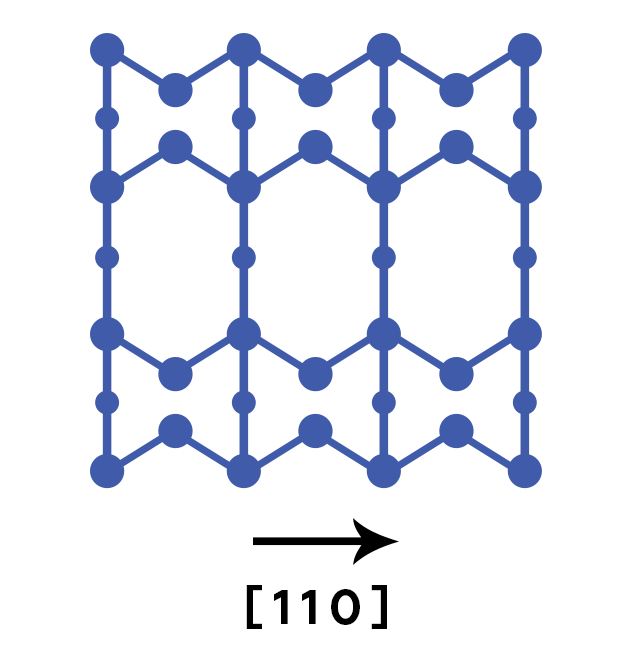
<style>
.page{position:relative;width:621px;height:669px;background:#ffffff}
.page>*{position:absolute;margin:0}
.t1{font:48px "Geometria-Bold";letter-spacing:0.19em;color:#000000;text-transform:uppercase}
</style>
<div class="page">
<p class="t1" style="left:246px;top:585px;width:141px;height:44px">[110]</p>
</div>
